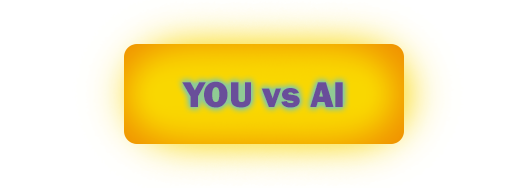
<style>
.page{position:relative;width:528px;height:188px;background:#ffffff}
.page>*{position:absolute;margin:0}
.t1{font:37px "FranklinGothic-Heavy";color:#694e9a}
</style>
<div class="page">
<p class="t1" style="left:182px;top:81px;width:161px;height:27px">YOU vs AI</p>
</div>
